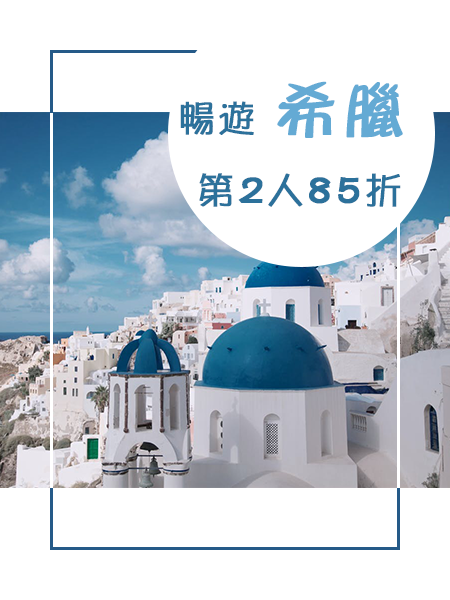
<style>
.page{position:relative;width:450px;height:600px;background:#ffffff}
.page>*{position:absolute;margin:0}
.t1{font:36px "DFPOP1Std-W5";letter-spacing:0.1em;color:#2c719b;font-weight:bold}
.t2{font:60px "DFPuDingStd-W7";letter-spacing:0.1em;color:#64aad4;font-weight:bold}
</style>
<div class="page">
<p class="t1" style="left:180px;top:81px;width:223px;height:57px">暢遊 <span class="t2">希臘</span></p>
<p class="t1" style="left:199px;top:173px;width:202px;height:34px">第2人85折</p>
</div>
